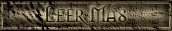
<style>
.page{position:relative;width:172px;height:31px}
.page>*{position:absolute;margin:0}
.t1{font:20.8px "Morpheus"}
</style>
<div class="page">
<p class="t1" style="left:44px;top:5px;width:83px;height:22px">Leer Más</p>
</div>
